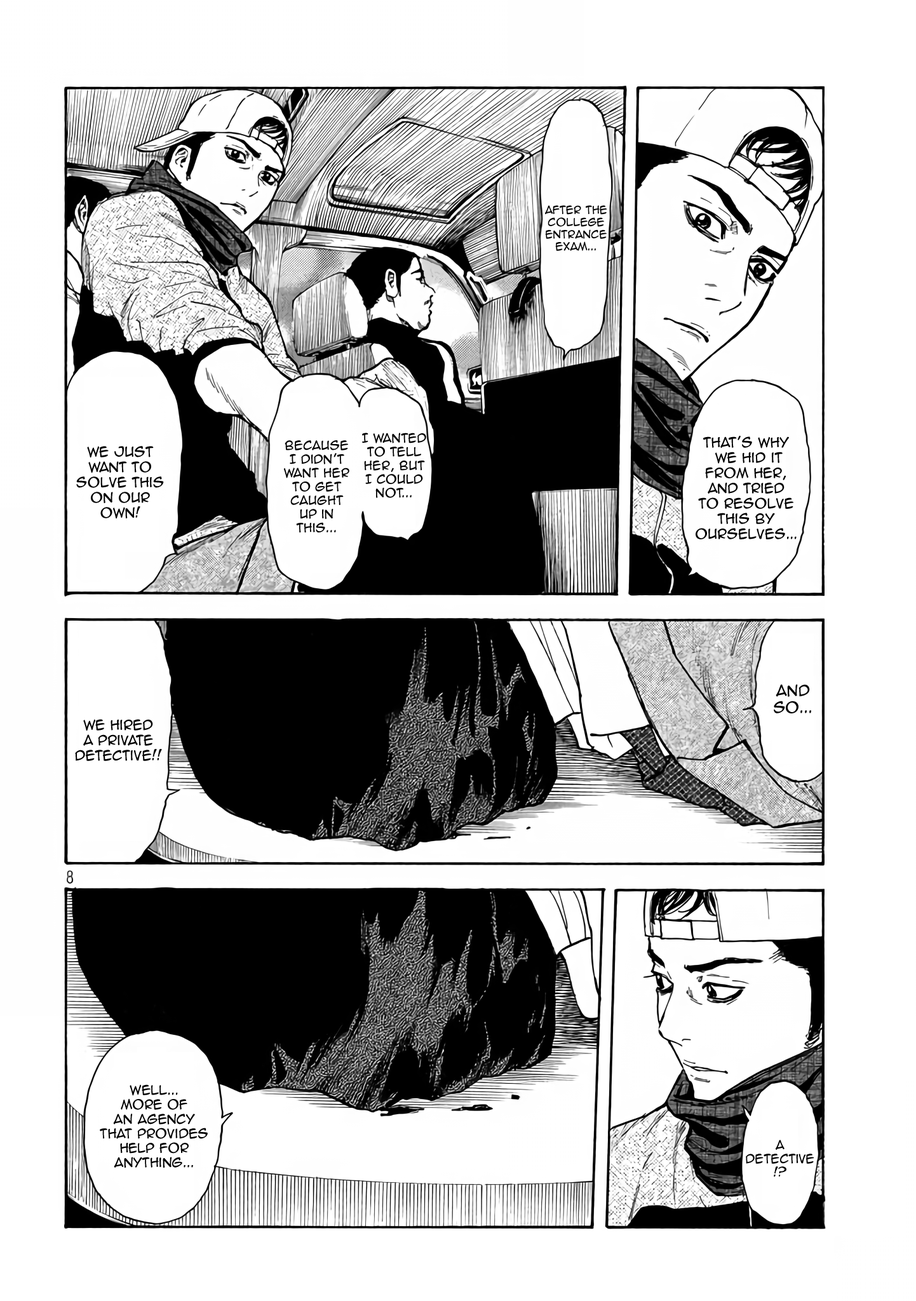
<style>
.page{position:relative;width:916px;height:1301px;background:#ffffff}
.page>*{position:absolute;margin:0}
.t1{font:10.2px "AnimeAce2.0BB";color:#000000}
.t2{font:11.4px "AnimeAce2.0BB";color:#000000}
.t3{font:12.7px "AnimeAce2.0BB";color:#000000}
.t4{font:14px "AnimeAce2.0BB";color:#000000}
.t5{font:12.1px "AnimeAce2.0BB";color:#000000}
</style>
<div class="page">
<p class="t1" style="left:545px;top:205px;width:62px;height:46px;text-align:center">after the college entrance exam...</p>
<p class="t2" style="left:362px;top:433px;width:64px;height:65px;text-align:center">I wanted <br>to tell her, but <br>I could not...</p>
<p class="t3" style="left:696px;top:436px;width:101px;height:103px;text-align:center">That’s why<br> we hid it from her, and tried <br>to resolve this by ourselves...</p>
<p class="t3" style="left:76px;top:446px;width:88px;height:73px;text-align:center">We just <br>want to <br>solve this <br>on our own!</p>
<p class="t2" style="left:283px;top:440px;width:66px;height:93px;text-align:center">Because <br>I didn’t want her <br>to get caught up in this...</p>
<p class="t4" style="left:774px;top:684px;width:37px;height:30px;text-align:center">and So...</p>
<p class="t3" style="left:75px;top:719px;width:87px;height:42px;text-align:center">We hired <br>a private detective!!</p>
<p class="t5" style="left:100px;top:1085px;width:108px;height:84px;text-align:center">Well... <br>more of <br>an agency <br>that provides help for anything...</p>
<p class="t2" style="left:746px;top:1140px;width:69px;height:37px;text-align:center">A detective!?</p>
</div>
